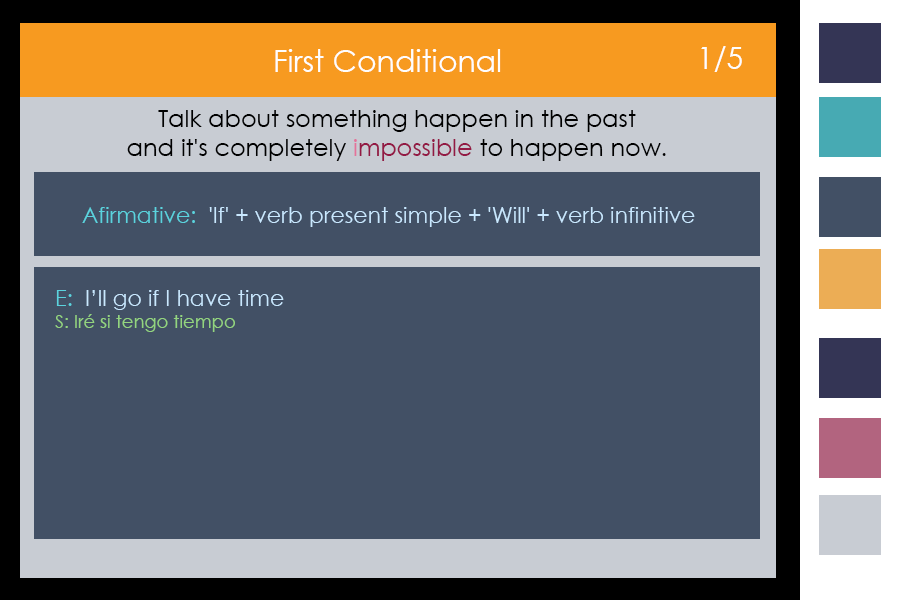
<style>
.page{position:relative;width:900px;height:600px;background:#425065}
.page>*{position:absolute;margin:0}
.t1{font:30px "CenturyGothic";color:#fefefe}
.t2{font:24px "CenturyGothic";color:#000000}
.t3{font:24px "CenturyGothic";color:#e4729a}
.t4{font:24px "CenturyGothic";color:#931944}
.t5{font:22px "CenturyGothic";color:#c9e8ff}
.t6{font:22px "CenturyGothic";color:#5bd3de}
.t7{font:18px "CenturyGothic";color:#93d47f}
</style>
<div class="page">
<p class="t1" style="left:275px;top:49px;width:226px;height:23px">First Conditional</p>
<p class="t1" style="left:701px;top:46px;width:41px;height:26px">1/5</p>
<p class="t2" style="left:127px;top:110px;width:539px;height:51px;text-align:center">Talk about something happen in the past<br>and it's completely <span class="t3">i</span><span class="t4">mpossible</span> to happen now.</p>
<p class="t5" style="left:82px;top:207px;width:613px;height:20px"><span class="t6">Afirmative:</span>  'If' + verb present simple + 'Will' + verb infinitive</p>
<p class="t5" style="left:55px;top:290px;width:229px;height:42px"><span class="t6">E:</span>  I’ll go if I have time<br><span class="t7">S: Iré si tengo tiempo</span></p>
</div>
